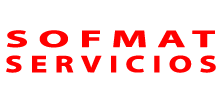
<style>
.page{position:relative;width:220px;height:100px;background:#ffffff}
.page>*{position:absolute;margin:0}
.t1{font:24px "MyriadPro-Bold";letter-spacing:0.2em;color:#ff0000;font-weight:bold;scale:1.8 1}
.t2{font:24px "MyriadPro-Bold";letter-spacing:0.2em;color:#ff0101;font-weight:bold;scale:1.35 1}
</style>
<div class="page">
<p class="t1" style="left:7px;top:30px;width:208px;height:18px">SOFMAT</p>
<p class="t2" style="left:6px;top:55px;width:210px;height:18px">SERVICIOS</p>
</div>
